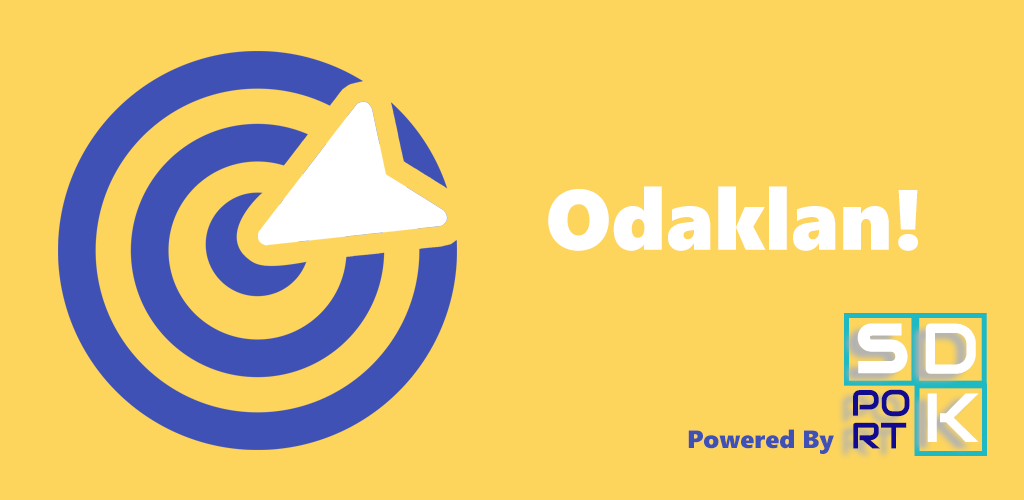
<style>
.page{position:relative;width:1024px;height:500px;background:#fdd55c}
.page>*{position:absolute;margin:0}
.t1{font:85.5px "SegoeUIBlack";color:#ffffff}
.t2{font:93.9px "Audiowide-Regular";color:#ffffff}
.t3{font:71.4px "Audiowide-Regular";color:#ffffff}
.t4{font:36.4px/32.8px "Audiowide-Regular";color:#120a8f}
.t5{font:68.8px "Audiowide-Regular";color:#ffffff}
.t6{font:25px "SegoeUIBlack";color:#3f51b5}
</style>
<div class="page">
<p class="t1" style="left:548px;top:186px;width:370px;height:65px">Odaklan!</p>
<p class="t2" style="left:857px;top:323px;width:51px;height:51px">s</p>
<p class="t3" style="left:925px;top:323px;width:51px;height:51px">D</p>
<p class="t4" style="left:853px;top:389px;width:57px;height:60px">PO<br>RT</p>
<p class="t5" style="left:927px;top:393px;width:52px;height:49px">K</p>
<p class="t6" style="left:688px;top:429px;width:146px;height:25px">Powered By</p>
</div>
